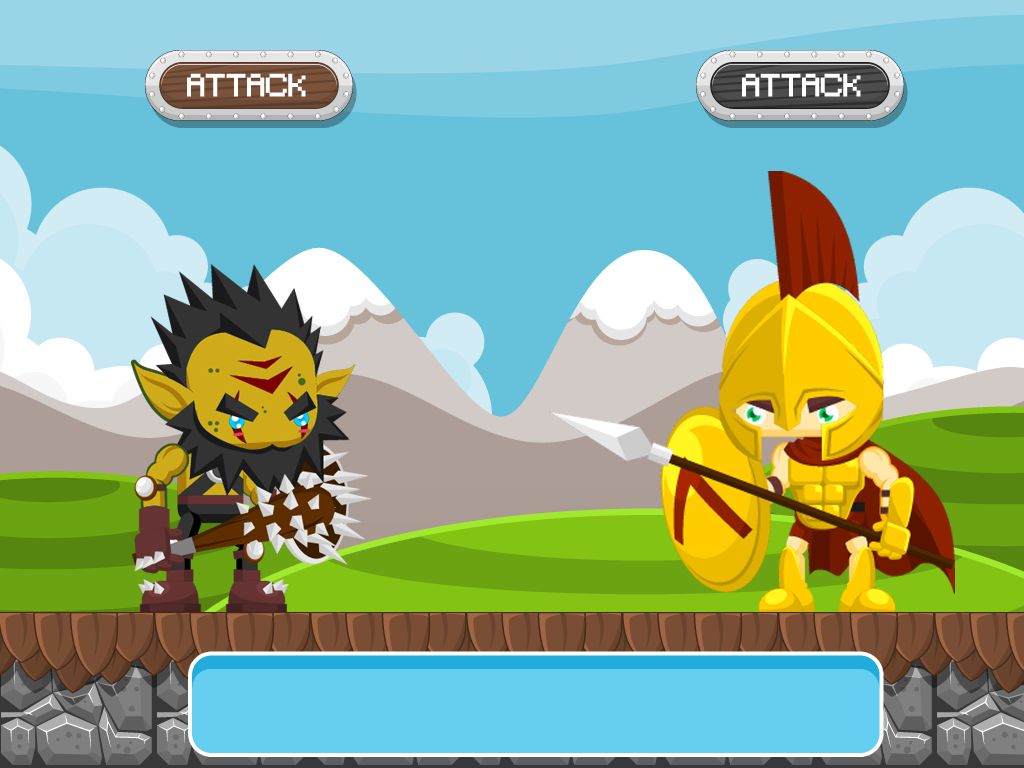
<style>
.page{position:relative;width:1024px;height:768px}
.page>*{position:absolute;margin:0}
.t1{font:30px "Minecraft";color:#ffffff}
</style>
<div class="page">
<p class="t1" style="left:187px;top:73px;width:119px;height:24px">ATTACK</p>
<p class="t1" style="left:742px;top:73px;width:119px;height:24px">ATTACK</p>
</div>
